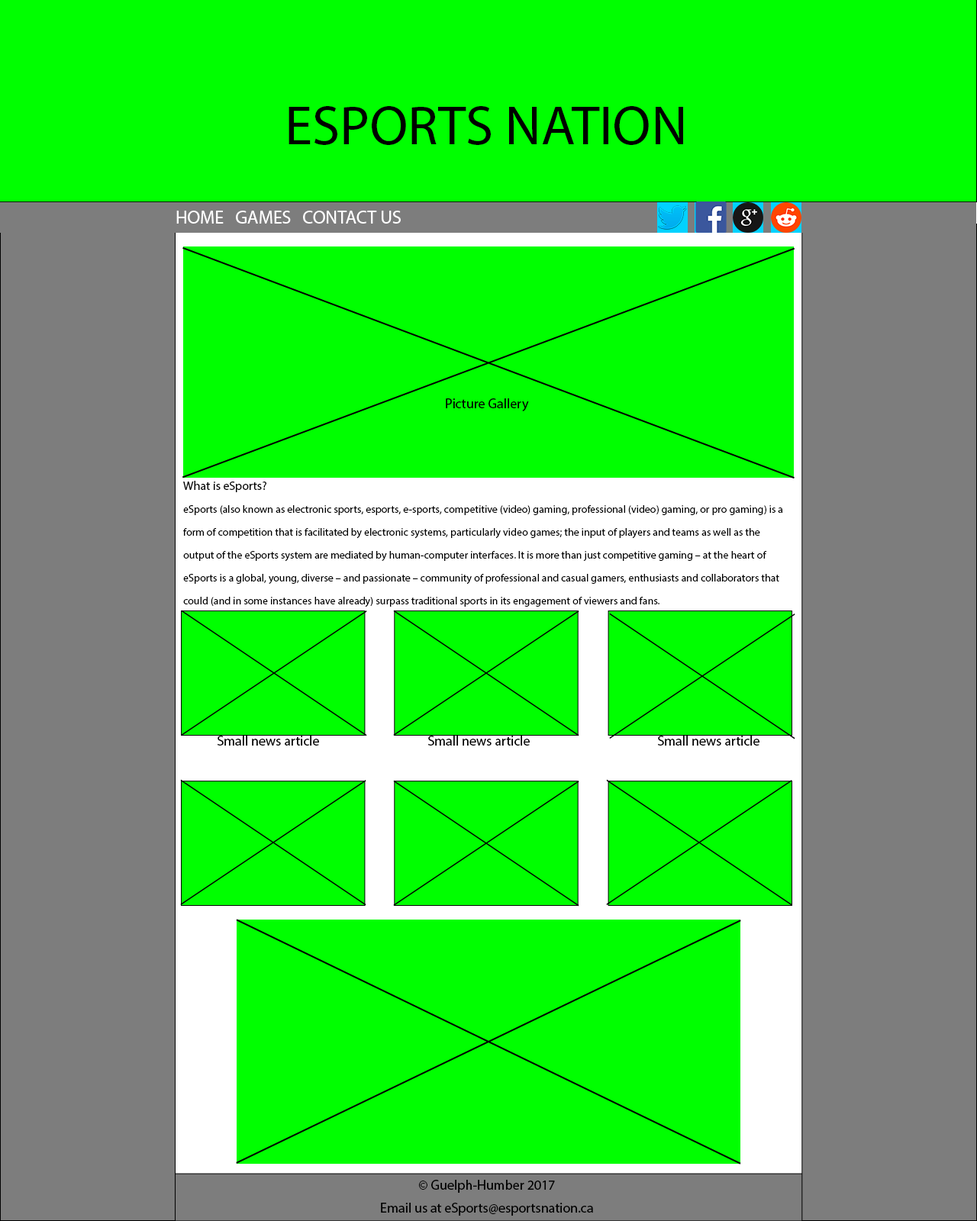
<style>
.page{position:relative;width:977px;height:1221px;background:#00ff00}
.page>*{position:absolute;margin:0}
.t1{font:55.7px "MyriadPro-Regular";color:#000000}
.t2{font:18.3px "MyriadPro-Regular";color:#ffffff}
.t3{font:13.7px "MyriadPro-Regular";color:#000000}
.t4{font:10.7px/22.9px "MyriadPro-Regular";color:#000000}
.t5{font:12.2px/22.9px "MyriadPro-Regular";color:#000000}
.t6{font:13.7px/22.9px "MyriadPro-Regular";color:#000000}
</style>
<div class="page">
<p class="t1" style="left:288px;top:106px;width:395px;height:39px">ESPORTS NATION</p>
<p class="t2" style="left:176px;top:211px;width:225px;height:13px">HOME   GAMES   CONTACT US</p>
<p class="t3" style="left:446px;top:398px;width:83px;height:13px">Picture Gallery</p>
<p class="t4" style="left:183px;top:481px;width:600px;height:126px"><span class="t5">What is eSports?<br></span>eSports (also known as electronic sports, esports, e-sports, competitive (video) gaming, professional (video) gaming, or pro gaming) is a form of competition that is facilitated by electronic systems, particularly video games; the input of players and teams as well as the output of the eSports system are mediated by human-computer interfaces. It is more than just competitive gaming – at the heart of eSports is a global, young, diverse – and passionate – community of professional and casual gamers, enthusiasts and collaborators that could (and in some instances have already) surpass traditional sports in its engagement of viewers and fans.</p>
<p class="t3" style="left:217px;top:736px;width:102px;height:9px">Small news article</p>
<p class="t3" style="left:428px;top:736px;width:102px;height:9px">Small news article</p>
<p class="t3" style="left:658px;top:736px;width:101px;height:9px">Small news article</p>
<p class="t6" style="left:381px;top:1180px;width:212px;height:36px;text-align:center">© Guelph-Humber 2017<br>Email us at eSports@esportsnation.ca</p>
</div>
